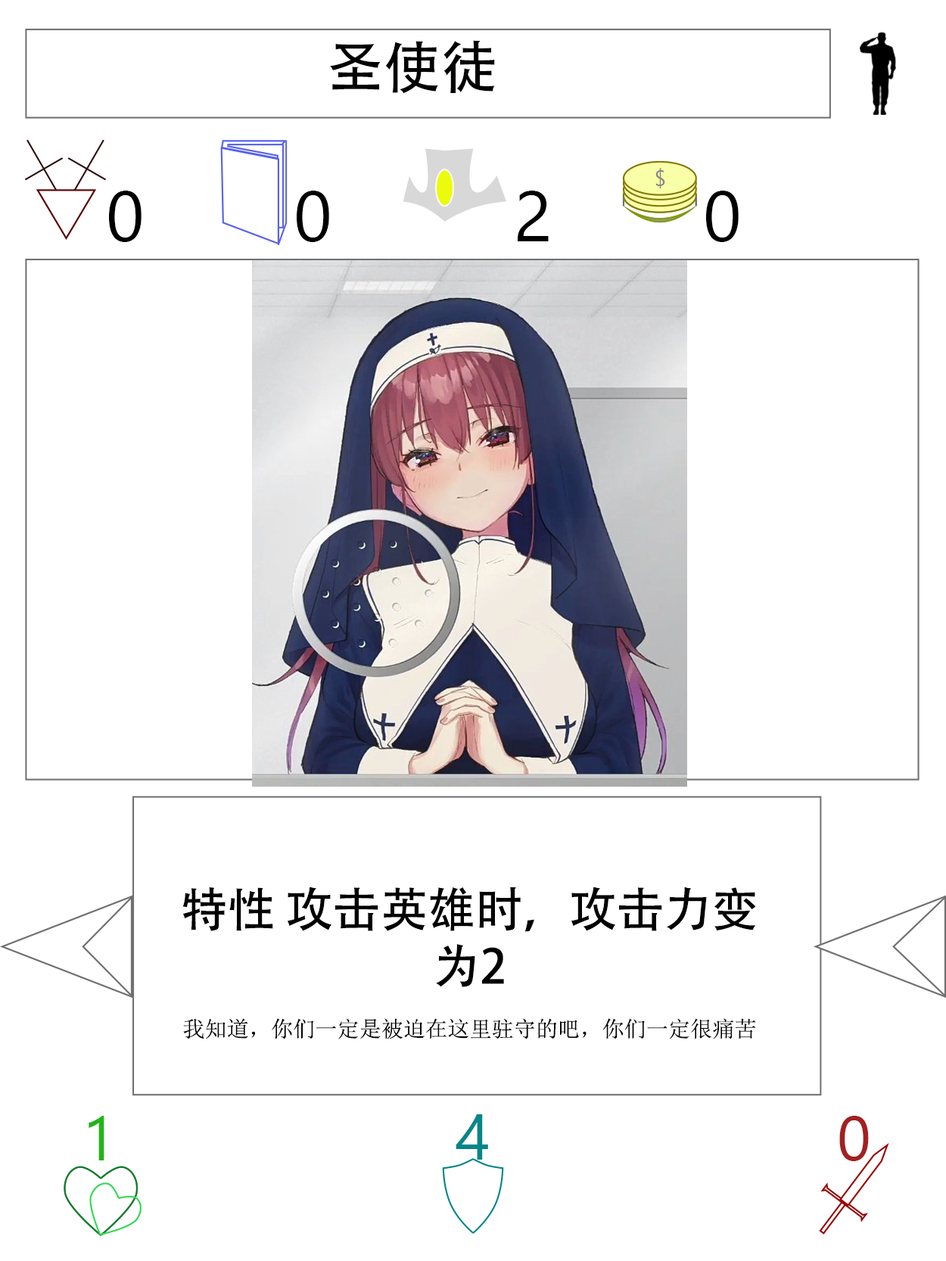
<style>
.page{position:relative;width:946px;height:1261px;background:#ffffff}
.page>*{position:absolute;margin:0}
.t1{font:56.7px "AdobeHeitiStd-Regular";color:#000000}
.t2{font:70.9px "SegoeUI";color:#000000}
.t3{font:22.1px "NSimSun";color:#000000}
.t4{font:47.3px "AdobeHeitiStd-Regular";color:#000000}
.t5{font:63px "SegoeUI";color:#22b518}
.t6{font:64.6px "SegoeUI";color:#05868a}
.t7{font:63px "SegoeUI";color:#a32020}
</style>
<div class="page">
<p class="t1" style="left:330px;top:40px;width:165px;height:54px">圣使徒</p>
<p class="t2" style="left:109px;top:191px;width:32px;height:51px">0</p>
<p class="t2" style="left:297px;top:191px;width:32px;height:51px">0</p>
<p class="t2" style="left:517px;top:191px;width:31px;height:50px">2</p>
<p class="t2" style="left:706px;top:191px;width:32px;height:51px">0</p>
<p class="t3" style="left:182px;top:887px;width:574px;height:152px;text-align:center"><span class="t4"><br>特性 攻击英雄时，攻击力变为2<br></span><br>我知道，你们一定是被迫在这里驻守的吧，你们一定很痛苦吧。不用担心，我不会杀你们，我会去杀死让你们痛苦的那个人</p>
<p class="t5" style="left:89px;top:1116px;width:15px;height:44px">1</p>
<p class="t6" style="left:455px;top:1114px;width:33px;height:46px">4</p>
<p class="t7" style="left:839px;top:1116px;width:29px;height:45px">0</p>
</div>
